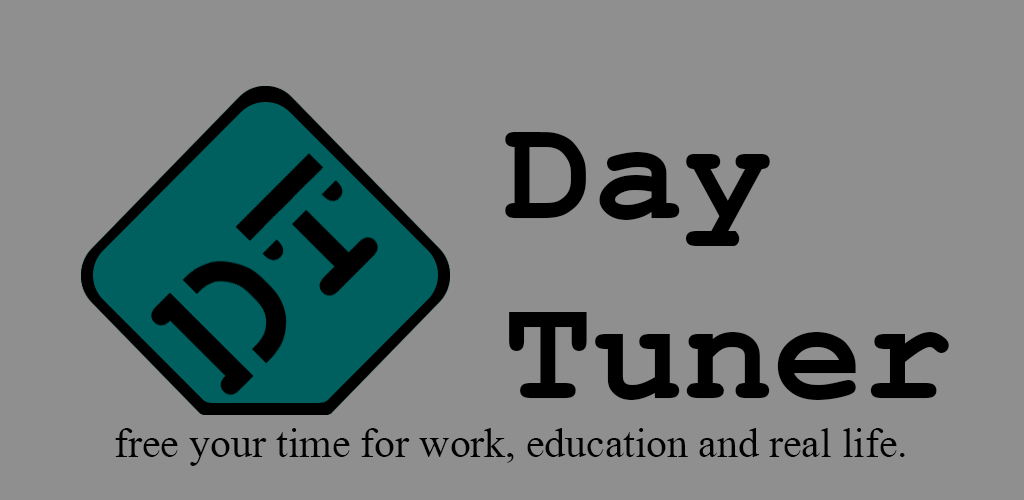
<style>
.page{position:relative;width:1024px;height:500px;background:#8f8f8f}
.page>*{position:absolute;margin:0}
.t1{font:150px "CourierNewPS-BoldMT";color:#000000}
.t2{font:41.7px "MongolianBaiti";color:#000000}
</style>
<div class="page">
<p class="t1" style="left:505px;top:132px;width:444px;height:268px">Day<br>Tuner</p>
<p class="t2" style="left:115px;top:428px;width:790px;height:38px">free your time for work, education and real life.</p>
</div>
